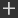
<style>
.page{position:relative;width:18px;height:18px;background:#333333}
.page>*{position:absolute;margin:0}
.t1{font:24px "Roboto-Light";letter-spacing:-0.025em;color:#d7d7d7}
</style>
<div class="page">
<p class="t1" style="left:3px;top:2px;width:12px;height:13px">+</p>
</div>
